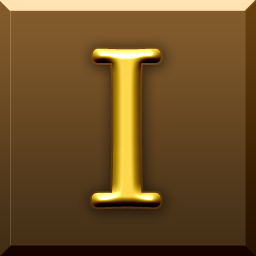
<style>
.page{position:relative;width:256px;height:256px}
.page>*{position:absolute;margin:0}
.t1{font:224.6px "FanwoodText";letter-spacing:-0.075em;font-weight:bold}
</style>
<div class="page">
<p class="t1" style="left:91px;top:48px;width:70px;height:160px">I</p>
</div>
